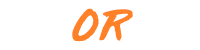
<style>
.page{position:relative;width:200px;height:50px;background:#ffffff}
.page>*{position:absolute;margin:0}
.t1{font:52.7px "ThirdRail";letter-spacing:0.04em;color:#ffffff}
.t2{font:52.7px "ThirdRail";letter-spacing:0.04em;color:#ff8127}
</style>
<div class="page">
<p class="t1" style="left:70px;top:7px;width:61px;height:34px">or</p>
<p class="t2" style="left:72px;top:8px;width:61px;height:34px">or</p>
</div>
